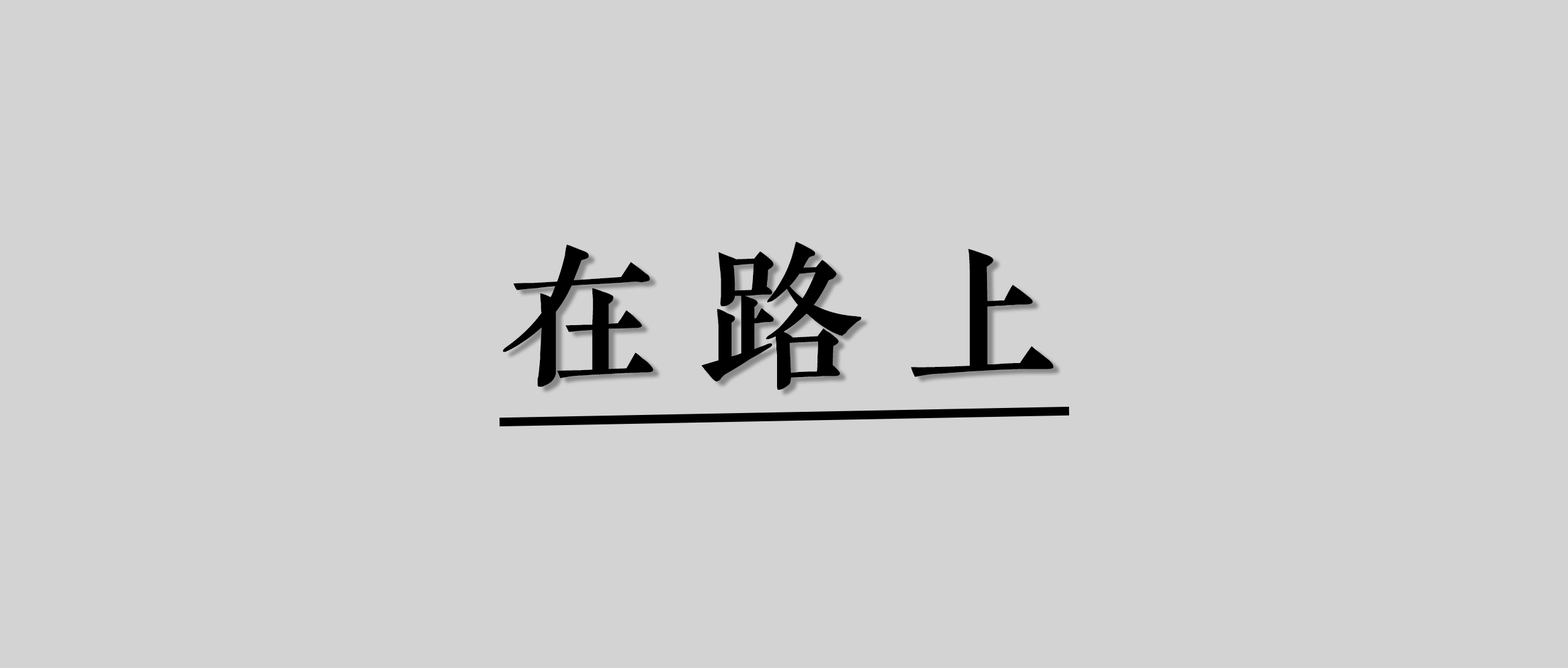
<style>
.page{position:relative;width:1568px;height:668px;background:#d3d3d3}
.page>*{position:absolute;margin:0}
.t1{font:167px "FZCUJINLFW--GB1-0";letter-spacing:0.2em;color:#000000}
</style>
<div class="page">
<p class="t1" style="left:503px;top:242px;width:550px;height:148px">在路上</p>
</div>
